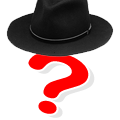
<style>
.page{position:relative;width:120px;height:120px;background:#ffffff}
.page>*{position:absolute;margin:0}
.t1{font:83.5px "ArialRoundedMTBold";letter-spacing:0.01em;color:#ff0000;scale:1.5 1}
.t2{font:83.5px "ArialRoundedMTBold";letter-spacing:0.01em;scale:1.5 1}
</style>
<div class="page">
<p class="t1" style="left:28px;top:51px;width:61px;height:63px;rotate:15deg">?</p>
<p class="t2" style="left:34px;top:55px;width:61px;height:63px;rotate:15deg">?</p>
</div>
